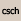
<style>
.page{position:relative;width:21px;height:21px;background:#d9cdc1}
.page>*{position:absolute;margin:0}
.t1{font:9px "Tahoma";color:#000000}
</style>
<div class="page">
<p class="t1" style="left:2px;top:7px;width:17px;height:8px">csch</p>
</div>
